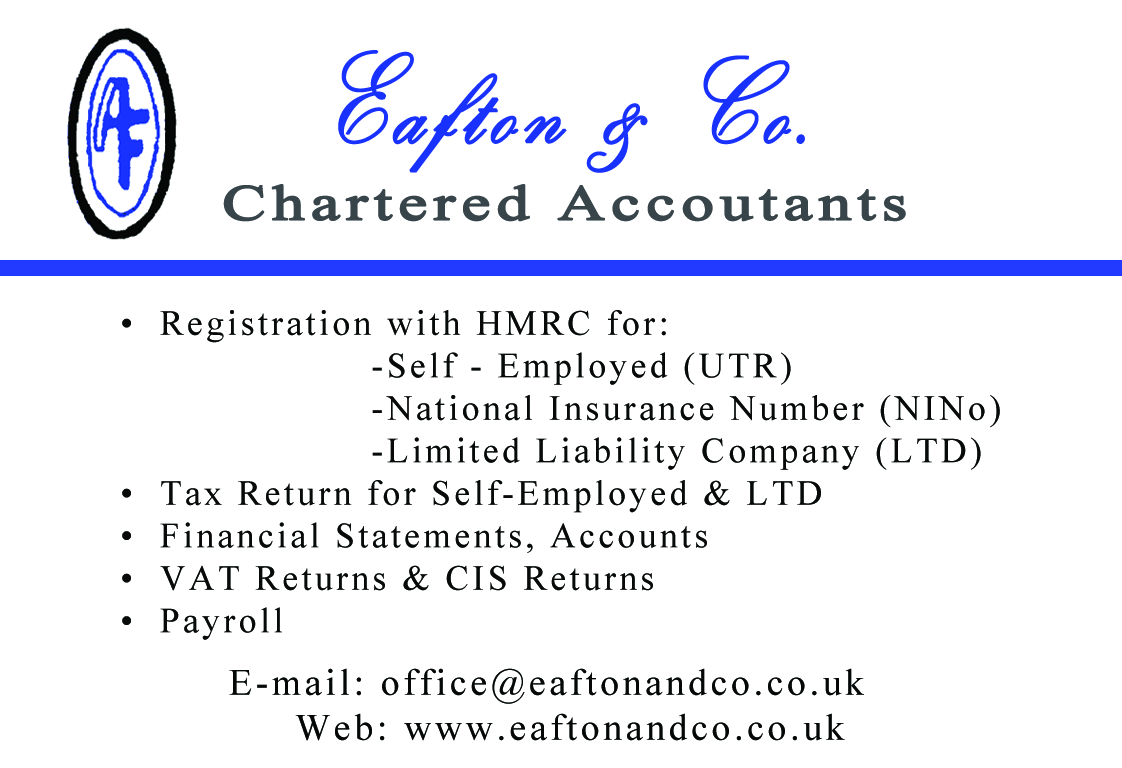
<style>
.page{position:relative;width:1122px;height:768px;background:#ffffff}
.page>*{position:absolute;margin:0}
.t1{font:125px "KunstlerScript";letter-spacing:0.07em;color:#1931ff;font-weight:bold;scale:0.8 1}
.t2{font:50px "TimesNewRomanPSMT";letter-spacing:0.07em;color:#374449;font-weight:bold;scale:1.3 1}
.t3{font:35.4px "TimesNewRomanPSMT";letter-spacing:0.1em;color:#060808}
.t4{font:37.5px "TimesNewRomanPSMT";letter-spacing:0.1em;color:#060808}
</style>
<div class="page">
<p class="t1" style="left:338px;top:50px;width:467px;height:123px">Eafton &amp; Co.</p>
<p class="t2" style="left:223px;top:184px;width:683px;height:38px">Chartered Accoutants</p>
<p class="t3" style="left:122px;top:310px;width:878px;height:330px">• Registration with HMRC for:<br>       -Self - Employed (UTR)<br>       -National Insurance Number (NINo)<br>       -Limited Liability Company (LTD)<br>• Tax Return for Self-Employed &amp; LTD <br>• Financial Statements, Accounts <br>• VAT Returns &amp; CIS Returns <br>• Payroll</p>
<p class="t4" style="left:229px;top:668px;width:635px;height:73px">E-mail: office@eaftonandco.co.uk<br>     Web: www.eaftonandco.co.uk</p>
</div>
